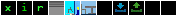
<style>
.page{position:relative;width:177px;height:16px;background:#000000}
.page>*{position:absolute;margin:0}
.t1{font:12px "OCRAbyBT-Regular"}
.t2{font:12px "OCRAbyBT-Regular";color:#0ad000}
.t3{font:12px "OCRAbyBT-Regular";color:#34ff39}
</style>
<div class="page">
<p class="t1" style="left:5px;top:6px;width:6px;height:5px">x</p>
<p class="t2" style="left:22px;top:3px;width:5px;height:8px">i</p>
<p class="t3" style="left:37px;top:6px;width:6px;height:5px">r</p>
</div>
